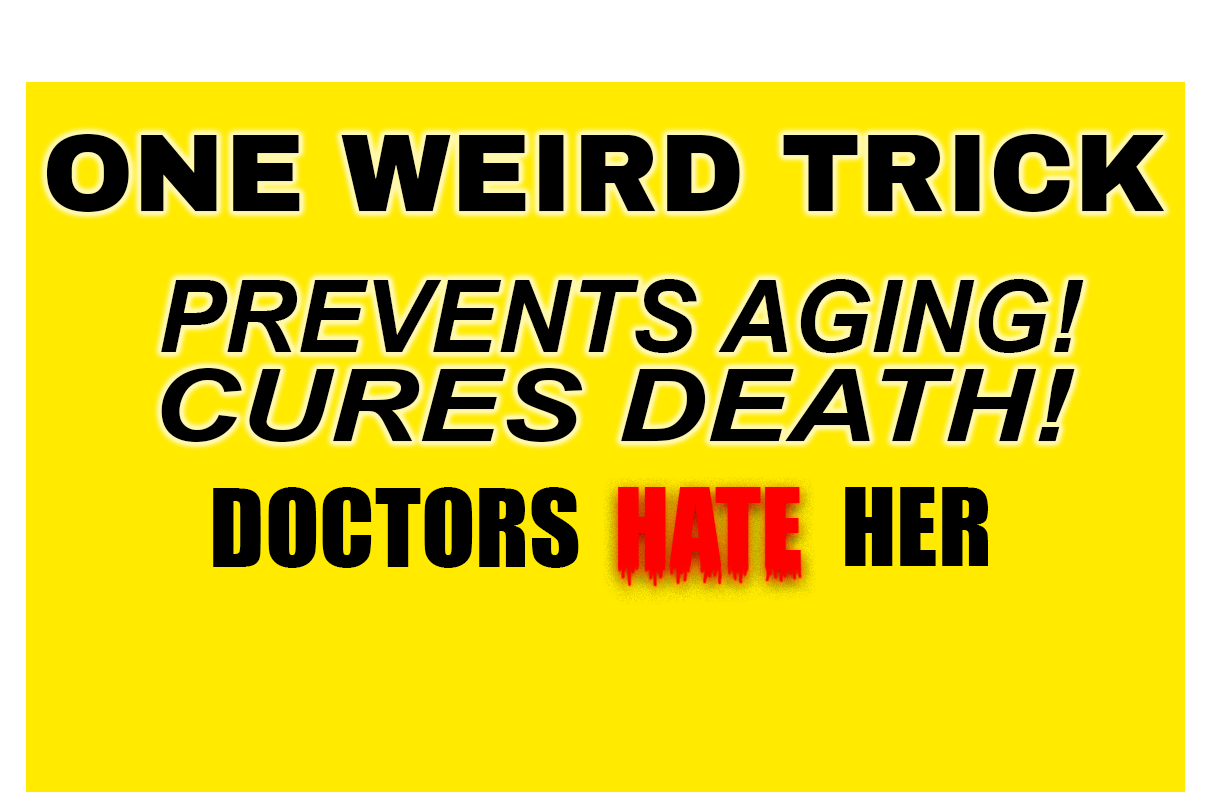
<style>
.page{position:relative;width:1210px;height:810px;background:#ffea00}
.page>*{position:absolute;margin:0}
.t1{font:110px "ArchivoBlack-Regular";color:#000000}
.t2{font:100px "Arial-BoldItalicMT";color:#000000}
.t3{font:100px "Arial-BoldItalicMT";color:#000000;scale:1.23 1}
.t4{font:100px "Impact";color:#000000}
</style>
<div class="page">
<p class="t1" style="left:46px;top:134px;width:1119px;height:78px">ONE WEIRD TRICK</p>
<p class="t2" style="left:161px;top:279px;width:923px;height:74px">PREVENTS AGING!</p>
<p class="t3" style="left:161px;top:368px;width:914px;height:74px">CURES DEATH!</p>
<p class="t4" style="left:213px;top:487px;width:366px;height:81px">DOCTORS</p>
<p class="t4" style="left:845px;top:487px;width:143px;height:79px">HER</p>
</div>
